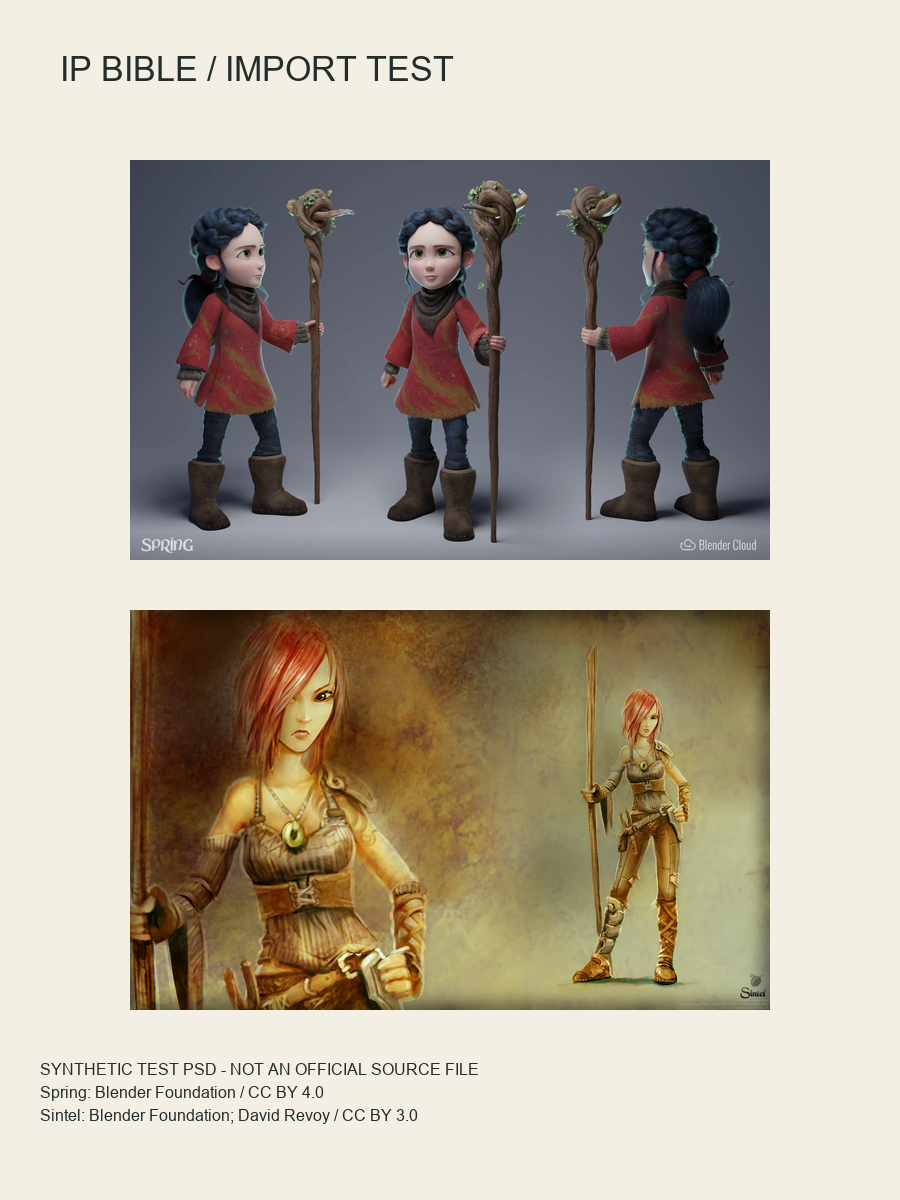
<style>
.page{position:relative;width:900px;height:1200px;background:#f3efe5}
.page>*{position:absolute;margin:0}
.t1{font:34px "ArialMT";color:#232d2c}
.t2{font:16px "ArialMT";color:#232d2c}
</style>
<div class="page">
<p class="t1" style="left:60px;top:45px;width:780px;height:70px">IP BIBLE / IMPORT TEST</p>
<p class="t2" style="left:40px;top:1060px;width:820px;height:110px">SYNTHETIC TEST PSD - NOT AN OFFICIAL SOURCE FILE<br>Spring: Blender Foundation / CC BY 4.0<br>Sintel: Blender Foundation; David Revoy / CC BY 3.0</p>
</div>
